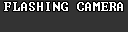
<style>
.page{position:relative;width:128px;height:32px;background:#333333}
.page>*{position:absolute;margin:0}
.t1{font:14px "Terminal";letter-spacing:0.05em;color:#ffffff}
</style>
<div class="page">
<p class="t1" style="left:4px;top:2px;width:119px;height:9px">FLASHING CAMERA</p>
</div>
